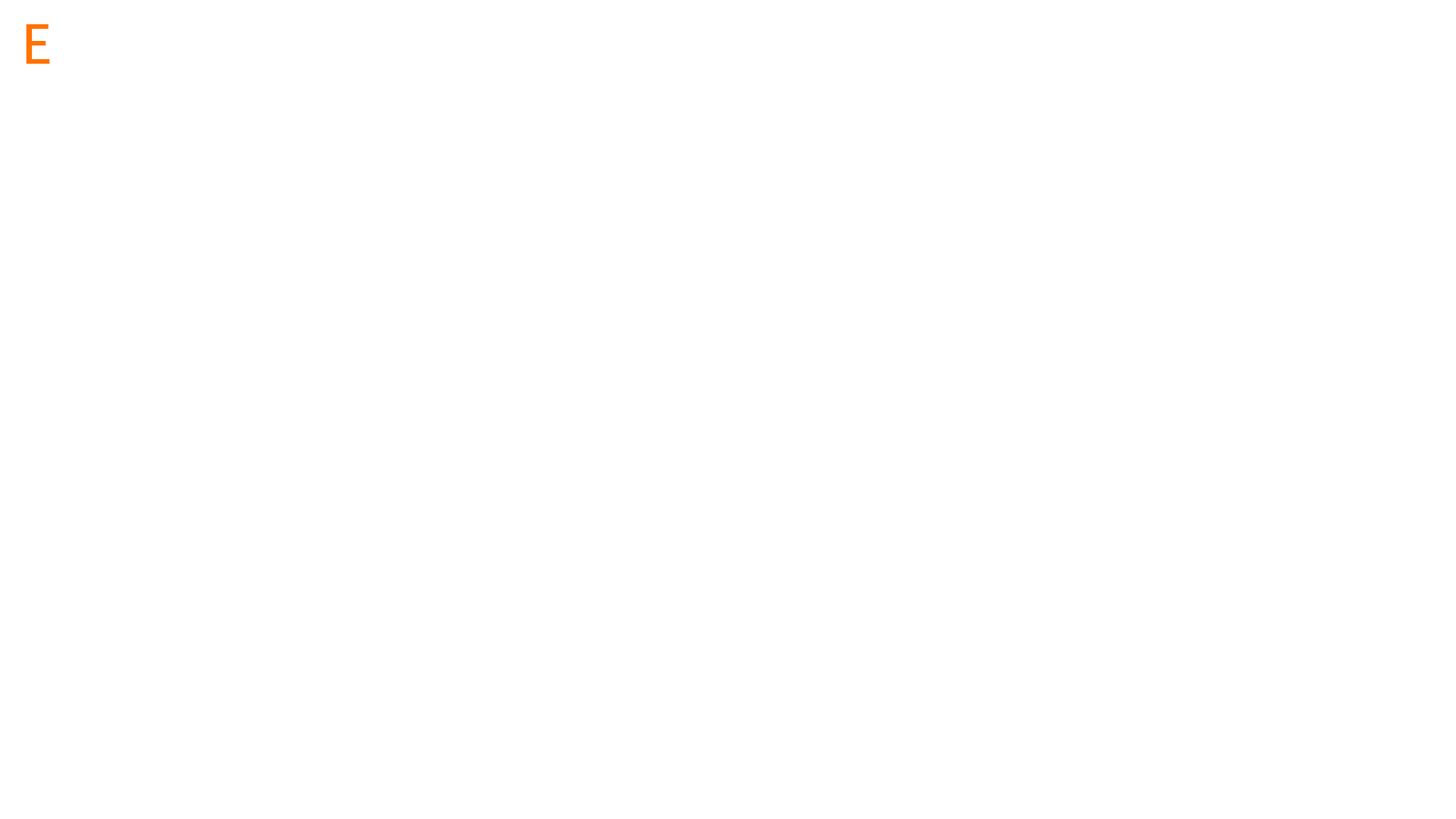
<style>
.page{position:relative;width:1456px;height:819px;background:#ffffff}
.page>*{position:absolute;margin:0}
.t1{font:54.6px "LucidaSansUnicode";color:#ff7200}
</style>
<div class="page">
<p class="t1" style="left:26px;top:24px;width:24px;height:40px">Е</p>
</div>
